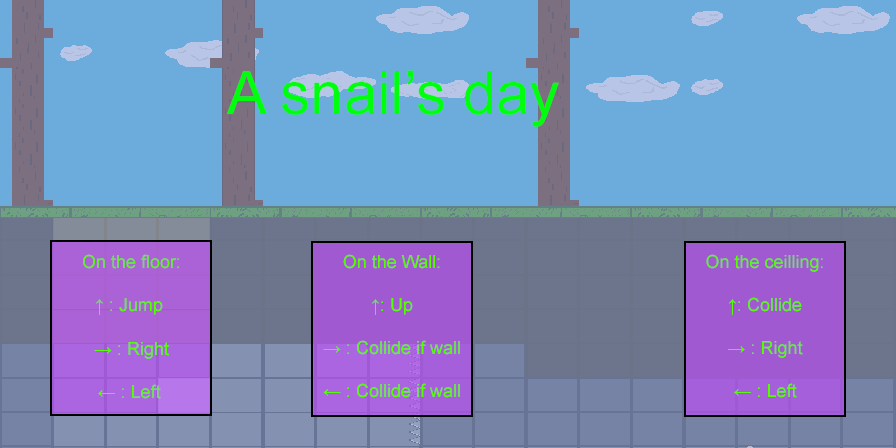
<style>
.page{position:relative;width:896px;height:448px;background:#6cacdd}
.page>*{position:absolute;margin:0}
.t1{font:60px "ArialMT";color:#00ff0d}
.t2{font:18px "ArialMT";color:#54ff00}
</style>
<div class="page">
<p class="t1" style="left:227px;top:70px;width:332px;height:57px">A snail’s day</p>
<p class="t2" style="left:83px;top:254px;width:96px;height:145px;text-align:center">On the floor:<br><br>↑ : Jump <br><br>→ : Right<br><br>← : Left</p>
<p class="t2" style="left:323px;top:254px;width:137px;height:144px;text-align:center">On the Wall:<br><br>↑: Up<br><br>→ : Collide if wall<br><br>← : Collide if wall</p>
<p class="t2" style="left:706px;top:254px;width:117px;height:144px;text-align:center">On the ceilling:<br><br>↑: Collide<br><br>→ : Right<br><br>← : Left</p>
</div>
